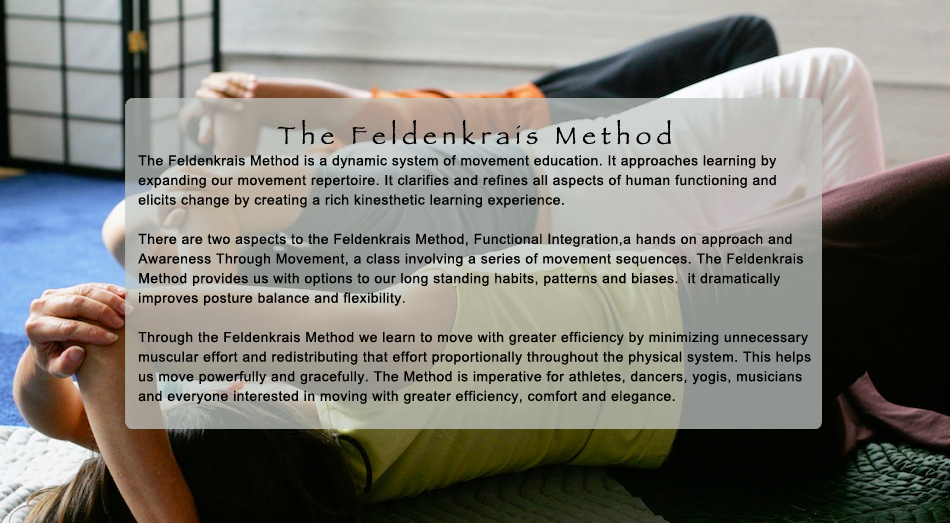
<style>
.page{position:relative;width:950px;height:523px}
.page>*{position:absolute;margin:0}
.t1{font:43.3px "Papyrus";letter-spacing:0.22em;color:#000000}
.t2{font:23.7px/19.6px "ArialMT";letter-spacing:0.04em;color:#000000}
</style>
<div class="page">
<p class="t1" style="left:277px;top:119px;width:394px;height:26px">The Feldenkrais Method</p>
<p class="t2" style="left:138px;top:155px;width:673px;height:249px">The Feldenkrais Method is a dynamic system of movement education. It approaches learning by <br>expanding our movement repertoire. It clarifies and refines all aspects of human functioning and <br>elicits change by creating a rich kinesthetic learning experience.<br><br>There are two aspects to the Feldenkrais Method, Functional Integration,a hands on approach and <br>Awareness Through Movement, a class involving a series of movement sequences. The Feldenkrais<br>Method provides us with options to our long standing habits, patterns and biases.  it dramatically <br>improves posture balance and flexibility. <br><br>Through the Feldenkrais Method we learn to move with greater efficiency by minimizing unnecessary <br>muscular effort and redistributing that effort proportionally throughout the physical system. This helps <br>us move powerfully and gracefully. The Method is imperative for athletes, dancers, yogis, musicians <br>and everyone interested in moving with greater efficiency, comfort and elegance.</p>
</div>
